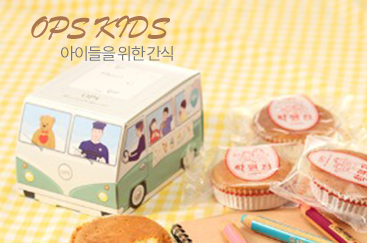
<style>
.page{position:relative;width:367px;height:243px}
.page>*{position:absolute;margin:0}
.t1{font:33.3px "BrushScriptMT";letter-spacing:-0.05em;color:#a9764d;text-transform:uppercase}
.t2{font:16.7px "NotoSansKR-Regular";letter-spacing:-0.1em;color:#777777;text-transform:uppercase}
</style>
<div class="page">
<p class="t1" style="left:31px;top:15px;width:140px;height:25px">OPS KIDS</p>
<p class="t2" style="left:61px;top:46px;width:112px;height:15px">아이들을 위한 간식</p>
</div>
